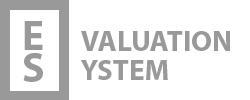
<style>
.page{position:relative;width:250px;height:100px;background:#ffffff}
.page>*{position:absolute;margin:0}
.t1{font:41.7px "MyriadPro-Bold";color:#999999}
.t2{font:29.2px "MyriadPro-Bold";color:#999999}
</style>
<div class="page">
<p class="t1" style="left:24px;top:21px;width:19px;height:29px">E</p>
<p class="t2" style="left:81px;top:31px;width:149px;height:20px">VALUATION</p>
<p class="t1" style="left:23px;top:53px;width:20px;height:29px">S</p>
<p class="t2" style="left:80px;top:60px;width:88px;height:20px">YSTEM</p>
</div>
